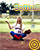
<style>
.page{position:relative;width:40px;height:50px}
.page>*{position:absolute;margin:0}
.t1{font:7px "Arial-BoldMT"}
</style>
<div class="page">
<p class="t1" style="left:14px;top:5px;width:26px;height:5px">Softball</p>
</div>
